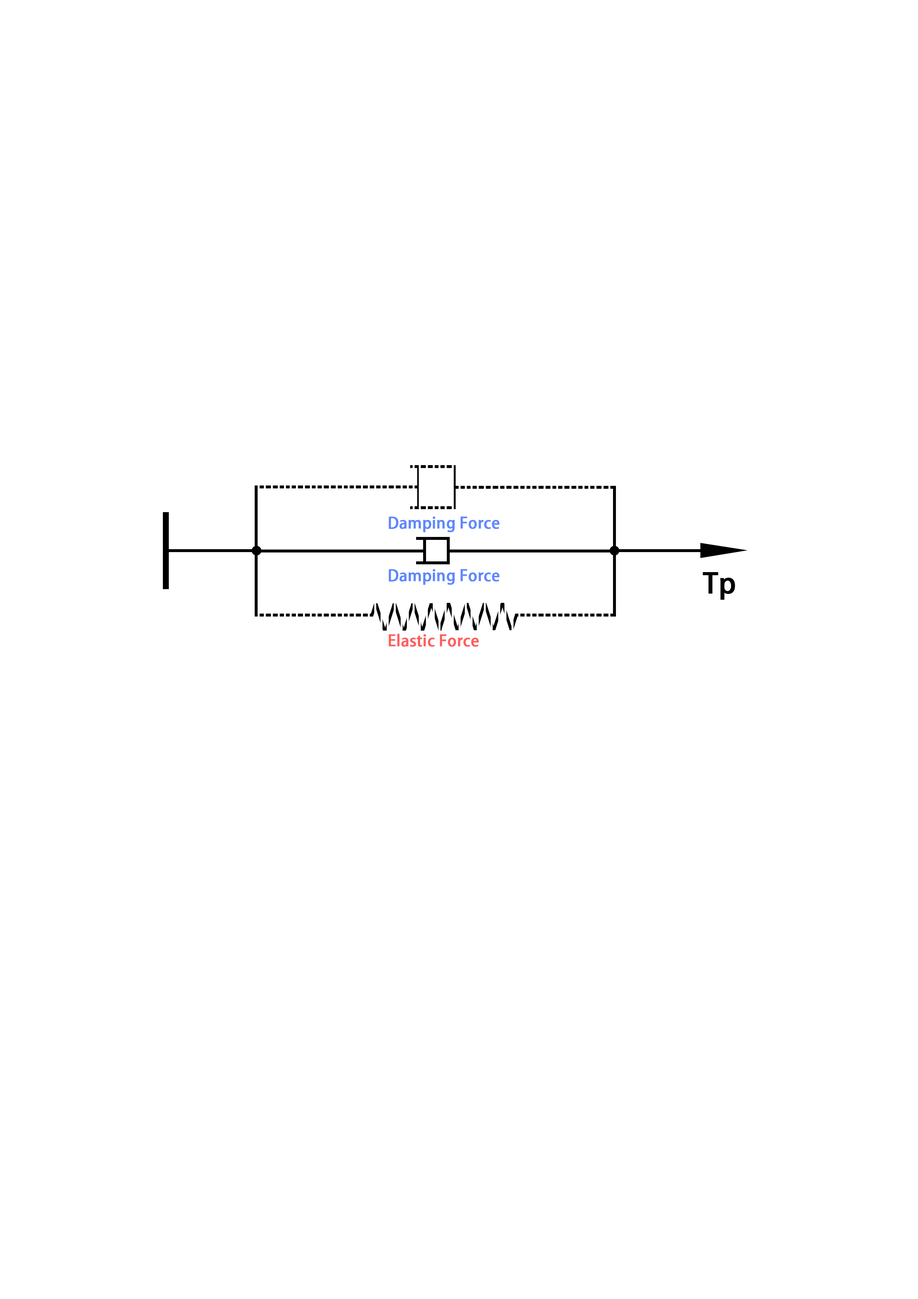
<style>
.page{position:relative;width:918px;height:1299px;background:#ffffff}
.page>*{position:absolute;margin:0}
.t1{font:15.4px "AdobeHeitiStd-Regular";color:#5f88fd;font-weight:bold}
.t2{font:27.8px "AdobeHeitiStd-Regular";color:#000000;font-weight:bold}
.t3{font:15.4px "AdobeHeitiStd-Regular";color:#fd5f5f;font-weight:bold}
</style>
<div class="page">
<p class="t1" style="left:389px;top:516px;width:111px;height:16px">Damping Force</p>
<p class="t1" style="left:389px;top:569px;width:111px;height:16px">Damping Force</p>
<p class="t2" style="left:703px;top:572px;width:32px;height:28px">Tp</p>
<p class="t3" style="left:389px;top:633px;width:90px;height:14px">Elastic Force</p>
</div>
